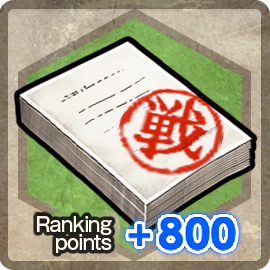
<style>
.page{position:relative;width:270px;height:270px}
.page>*{position:absolute;margin:0}
.t1{font:20px/18px "GothicMB101Pro-Medium";letter-spacing:-0.04em;color:#fef7f2;scale:0.9 1}
</style>
<div class="page">
<p class="t1" style="left:37px;top:216px;width:75px;height:37px;text-align:right">Ranking<br>points</p>
</div>
